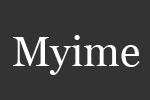
<style>
.page{position:relative;width:150px;height:100px;background:#333333}
.page>*{position:absolute;margin:0}
.t1{font:41.7px "Georgia";color:#ffffff}
</style>
<div class="page">
<p class="t1" style="left:13px;top:35px;width:127px;height:40px">Myime</p>
</div>
